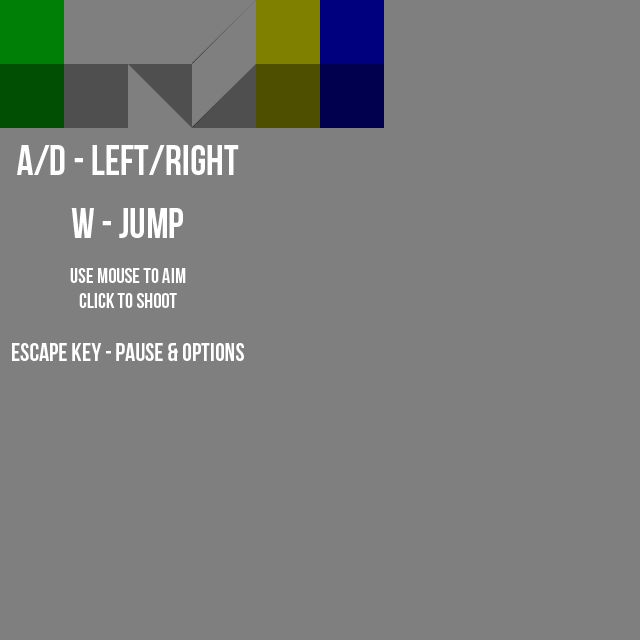
<style>
.page{position:relative;width:640px;height:640px;background:#7f7f7f}
.page>*{position:absolute;margin:0}
.t1{font:41.7px "BebasNeue";color:#ffffff}
.t2{font:20.8px "BebasNeue";color:#ffffff}
.t3{font:25px "BebasNeue";color:#ffffff}
</style>
<div class="page">
<p class="t1" style="left:17px;top:145px;width:222px;height:30px">A/d - Left/Right</p>
<p class="t1" style="left:71px;top:208px;width:112px;height:30px">W - Jump</p>
<p class="t2" style="left:70px;top:268px;width:116px;height:40px;text-align:center">Use mouse to aim<br>Click to shoot</p>
<p class="t3" style="left:12px;top:343px;width:232px;height:18px">ESCAPE key - Pause &amp; Options</p>
</div>
